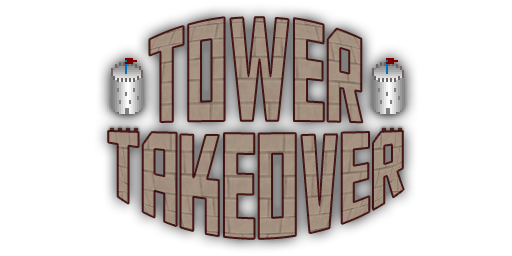
<style>
.page{position:relative;width:512px;height:256px;background:#ffffff}
.page>*{position:absolute;margin:0}
.t1{font:80px/64px "AldotheApache";color:#a28f7f}
</style>
<div class="page">
<p class="t1" style="left:108px;top:17px;width:296px;height:222px;text-align:center">Tower<br>Takeover</p>
</div>
